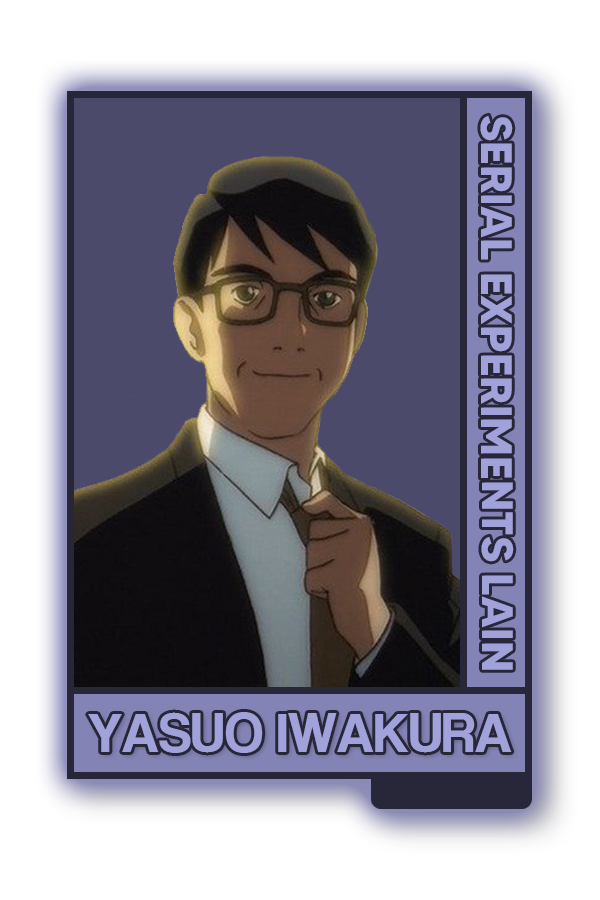
<style>
.page{position:relative;width:600px;height:900px;background:#ffffff}
.page>*{position:absolute;margin:0}
.t1{font:43.8px "MADETOMMY-Bold";color:#a2a2da}
.t2{font:57.4px "CoolveticaRg-Regular";color:#a2a2da}
</style>
<div class="page">
<p class="t1" style="left:480px;top:115px;width:34px;height:555px;rotate:90deg">SERIAL EXPERIMENTS LAIN</p>
<p class="t2" style="left:88px;top:712px;width:424px;height:41px">YASUO IWAKURA</p>
</div>
